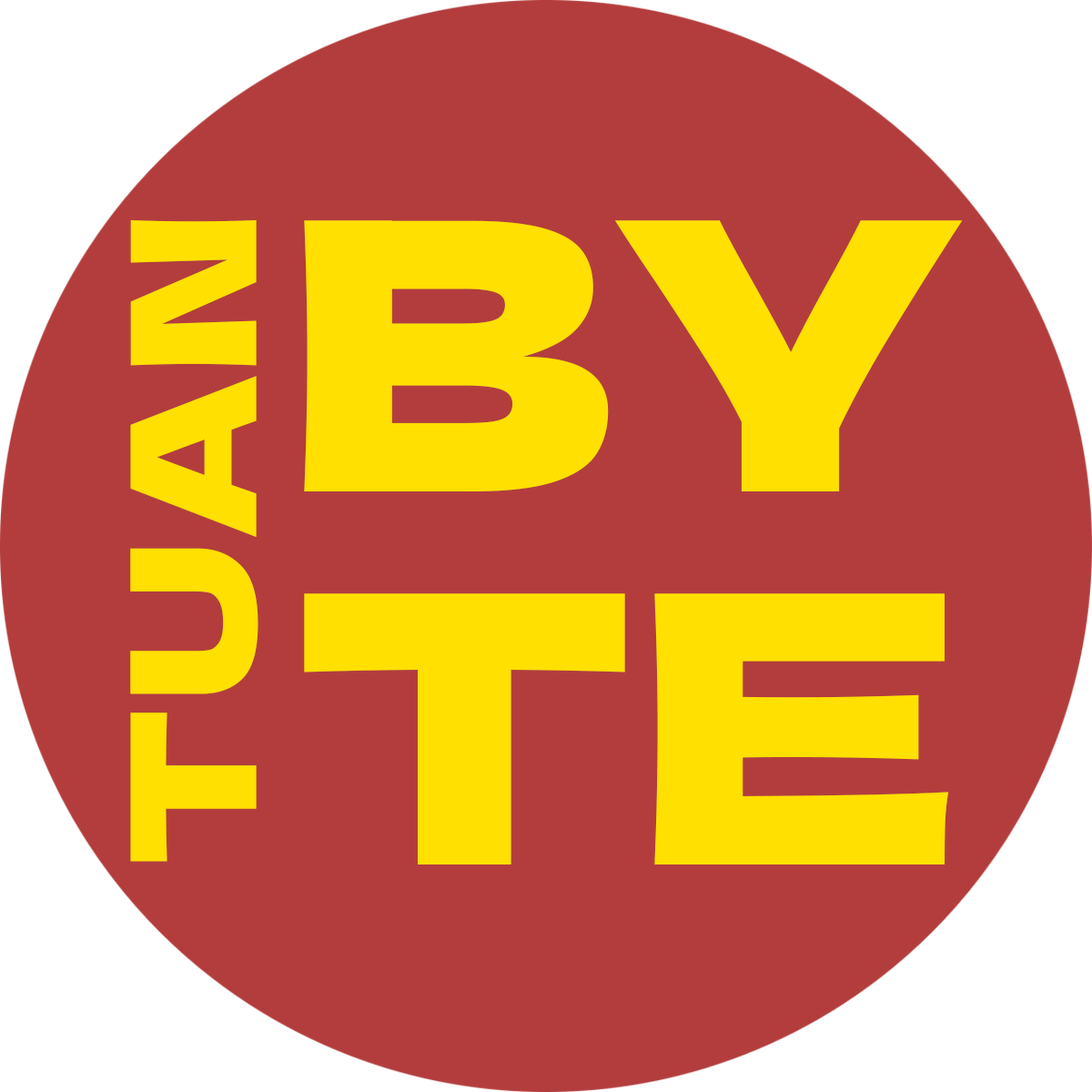
<style>
.page{position:relative;width:1092px;height:1092px;background:#b33d3d}
.page>*{position:absolute;margin:0}
.t1{font:172.9px "DelaGothicOne-Regular";letter-spacing:0.028em;color:#ffe000}
.t2{font:373.1px/373.1px "DelaGothicOne-Regular";color:#ffe000}
</style>
<div class="page">
<p class="t1" style="left:130px;top:219px;width:128px;height:643px;rotate:-90deg">TUAN</p>
<p class="t2" style="left:304px;top:220px;width:659px;height:644px">BYTE</p>
</div>
